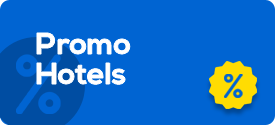
<style>
.page{position:relative;width:275px;height:125px;background:#0064d2}
.page>*{position:absolute;margin:0}
.t1{font:30px "NexaBold";color:#ffffff}
</style>
<div class="page">
<p class="t1" style="left:37px;top:33px;width:93px;height:21px">Promo</p>
<p class="t1" style="left:37px;top:63px;width:88px;height:22px">Hotels</p>
</div>
